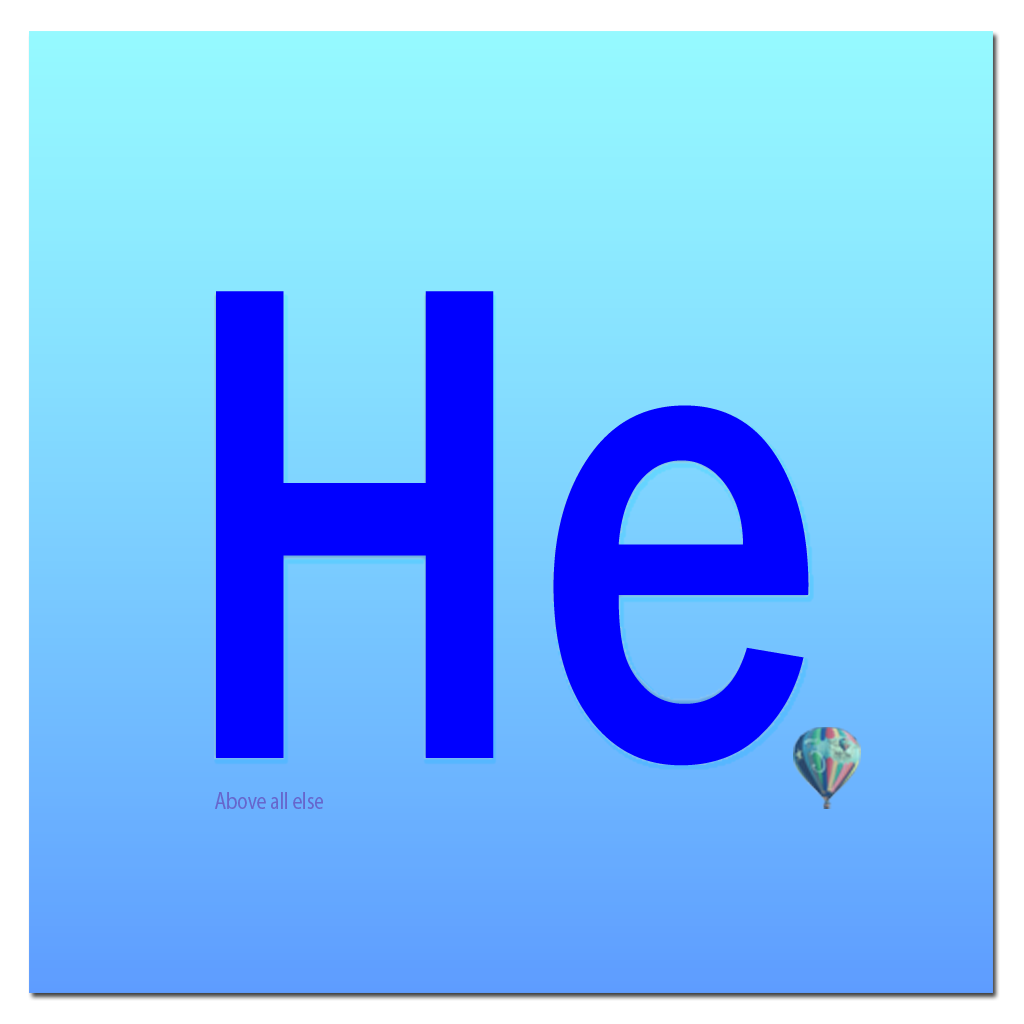
<style>
.page{position:relative;width:1024px;height:1024px}
.page>*{position:absolute;margin:0}
.t1{font:700px "FranklinGothic-Medium";color:#0000ff;scale:0.8 1}
.t2{font:24px "MyriadPro-Regular";color:#6666cc;scale:0.8 1}
</style>
<div class="page">
<p class="t1" style="left:216px;top:291px;width:593px;height:475px">He</p>
<p class="t2" style="left:215px;top:792px;width:108px;height:17px">Above all else</p>
</div>
